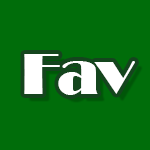
<style>
.page{position:relative;width:150px;height:150px;background:#006d0a}
.page>*{position:absolute;margin:0}
.t1{font:60px "Broadway";letter-spacing:-0.05em;color:#ffffff}
</style>
<div class="page">
<p class="t1" style="left:24px;top:54px;width:111px;height:41px">Fav</p>
</div>
